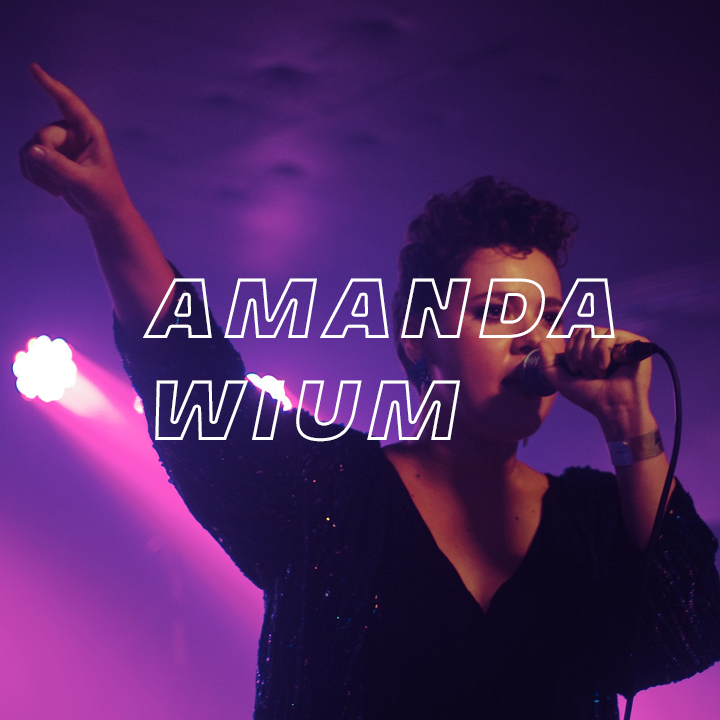
<style>
.page{position:relative;width:720px;height:720px}
.page>*{position:absolute;margin:0}
.t1{font:85px "Majoris-Italic";letter-spacing:0.1em;text-transform:uppercase}
</style>
<div class="page">
<p class="t1" style="left:143px;top:278px;width:472px;height:164px;text-align:right">amanda<br>wium</p>
</div>
